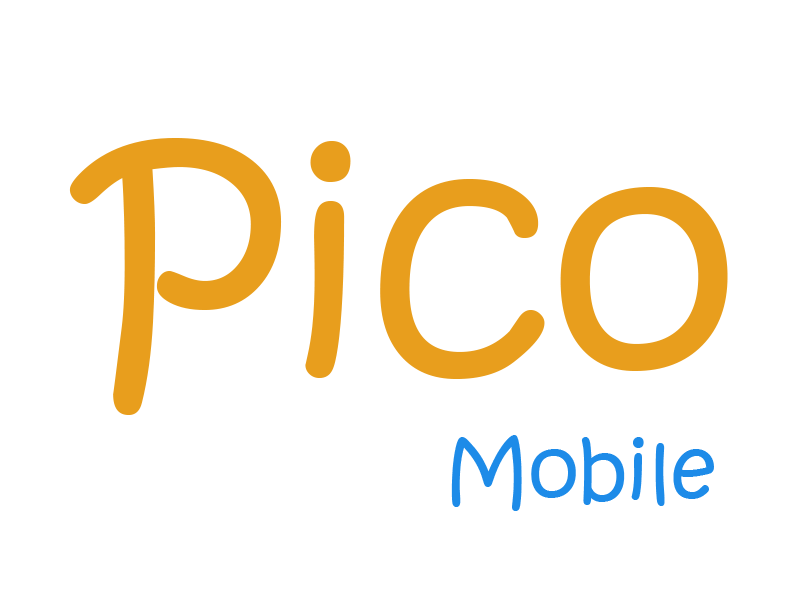
<style>
.page{position:relative;width:800px;height:600px;background:#ffffff}
.page>*{position:absolute;margin:0}
.t1{font:300px "KristenITC-Regular";color:#e89e1d}
.t2{font:80px "KristenITC-Regular";color:#1d8be8}
</style>
<div class="page">
<p class="t1" style="left:69px;top:138px;width:659px;height:277px">Pico</p>
<p class="t2" style="left:451px;top:435px;width:263px;height:76px">Mobile</p>
</div>
